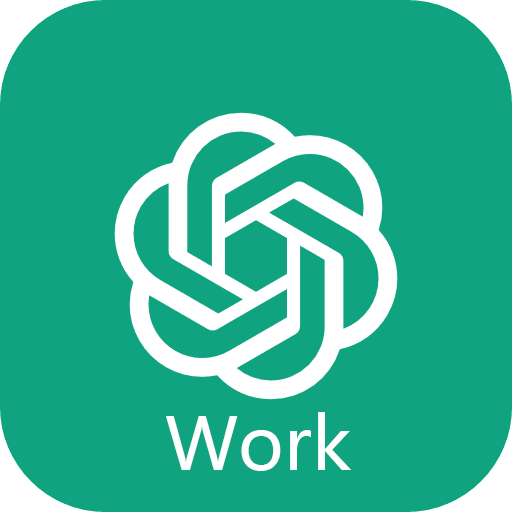
<style>
.page{position:relative;width:512px;height:512px;background:#10a37f}
.page>*{position:absolute;margin:0}
.t1{font:72px "MicrosoftYaHei";color:#ffffff}
</style>
<div class="page">
<p class="t1" style="left:166px;top:412px;width:186px;height:59px">Work</p>
</div>
